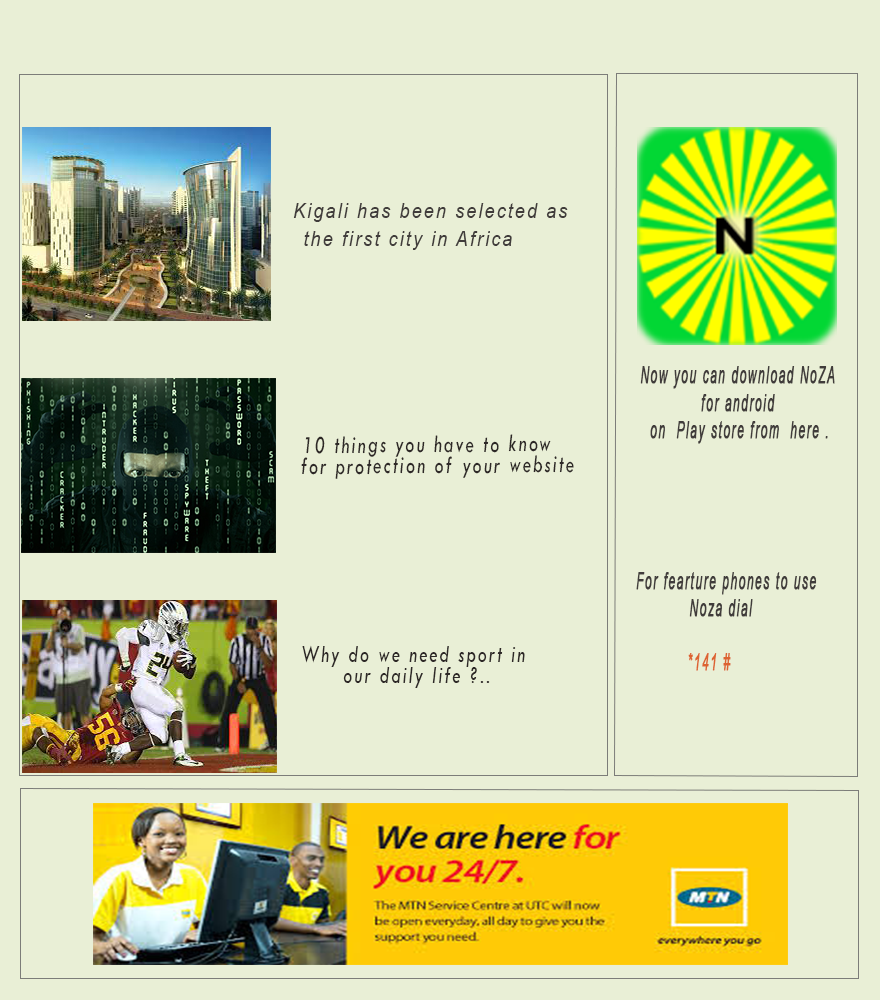
<style>
.page{position:relative;width:880px;height:1000px;background:#e9efd6}
.page>*{position:absolute;margin:0}
.t1{font:21.1px/28px "Arial-ItalicMT";letter-spacing:0.115em;color:#403c3b;scale:0.86 1}
.t2{font:23.2px/27px "Arial-ItalicMT";letter-spacing:0.115em;color:#403c3b;font-weight:bold;scale:0.5 1}
.t3{font:25.2px/21px "TwCenMT-Italic";letter-spacing:0.115em;color:#2d2827;scale:0.73 1}
.t4{font:23.2px/27px "Arial-ItalicMT";letter-spacing:0.115em;color:#dd6231;font-weight:bold;scale:0.5 1}
</style>
<div class="page">
<p class="t1" style="left:293px;top:203px;width:275px;height:47px;text-align:center">Kigali has been selected as <br> the first city in Africa</p>
<p class="t2" style="left:640px;top:366px;width:195px;height:78px;text-align:center">Now you can download NoZA <br>for android <br>on  Play store from  here .</p>
<p class="t3" style="left:301px;top:434px;width:273px;height:45px;text-align:center">10 things you have to know <br>   for protection of your website</p>
<p class="t2" style="left:636px;top:572px;width:181px;height:99px;text-align:center">For fearture phones to use <br>Noza dial    <br><br>      <span class="t4">*141 #</span></p>
<p class="t3" style="left:302px;top:645px;width:223px;height:43px;text-align:center">Why do we need sport in<br> our daily life ?..</p>
</div>
